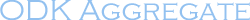
<style>
.page{position:relative;width:250px;height:20px;background:#ffffff}
.page>*{position:absolute;margin:0}
.t1{font:30px "CopperplateGothic-Light";color:#92c1f0}
</style>
<div class="page">
<p class="t1" style="left:0px;top:0px;width:250px;height:21px">ODK Aggregate</p>
</div>
